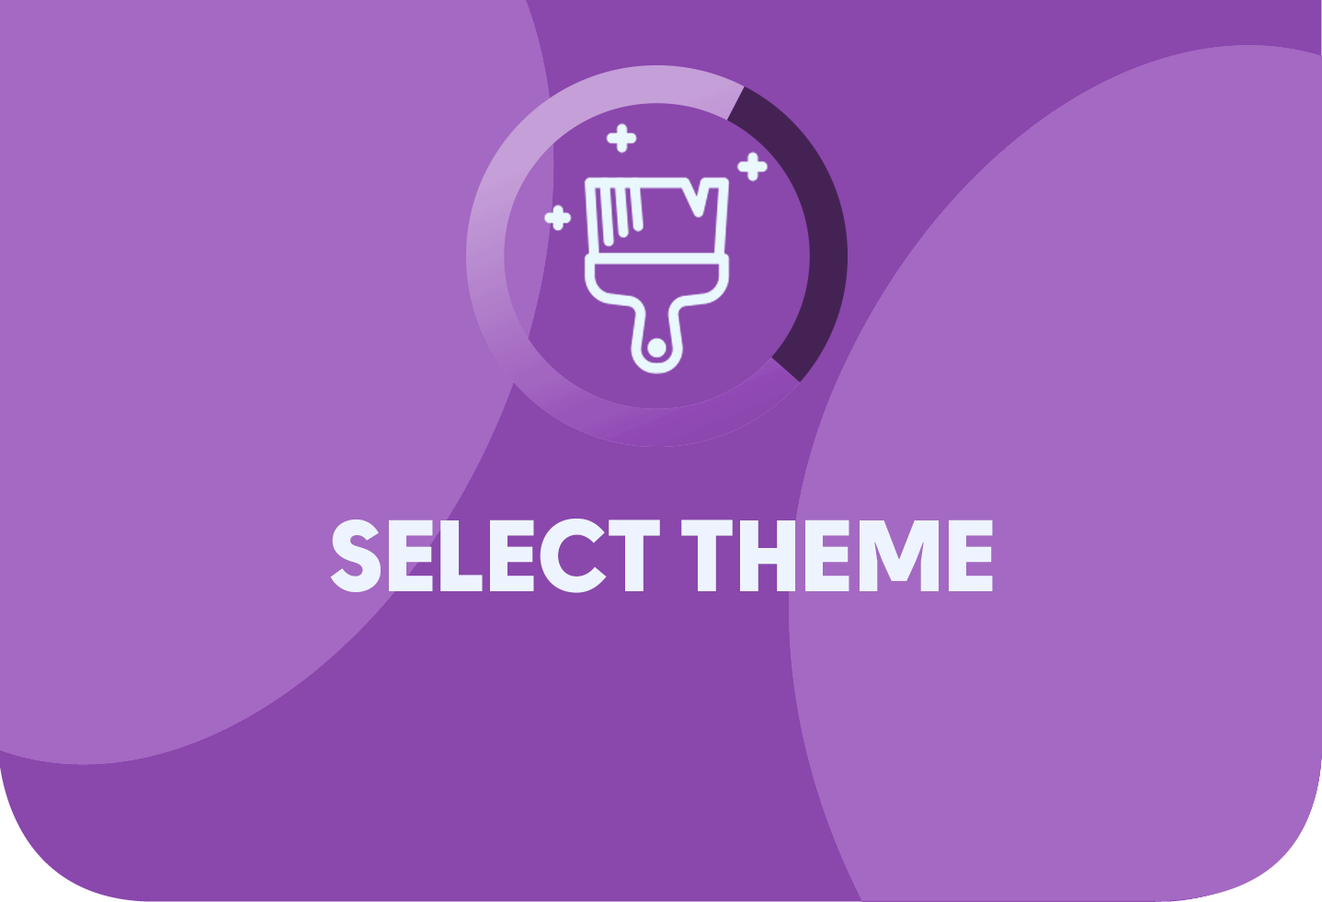
<style>
.page{position:relative;width:1322px;height:902px;background:#a469c2}
.page>*{position:absolute;margin:0}
.t1{font:101.1px "Solomon-Sans-Black";color:#eef4ff}
</style>
<div class="page">
<p class="t1" style="left:330px;top:519px;width:663px;height:74px">SELECT THEME</p>
</div>
